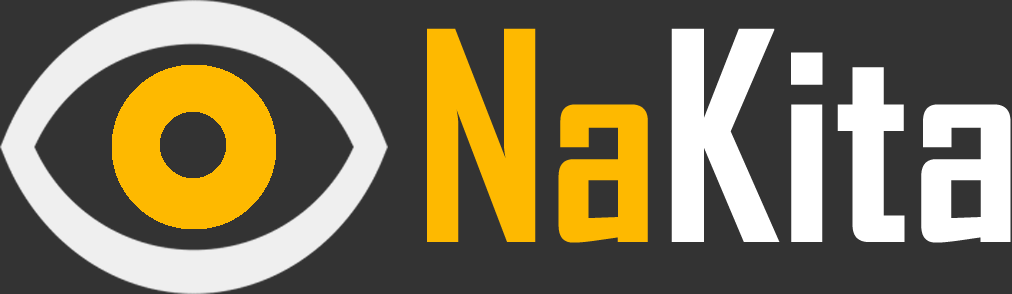
<style>
.page{position:relative;width:1012px;height:294px;background:#333333}
.page>*{position:absolute;margin:0}
.t1{font:279px "AgencyFB-Bold";color:#ffffff}
.t2{font:279px "AgencyFB-Bold";color:#feb900}
</style>
<div class="page">
<p class="t1" style="left:427px;top:28px;width:584px;height:215px"><span class="t2">Na</span>Kita</p>
</div>
